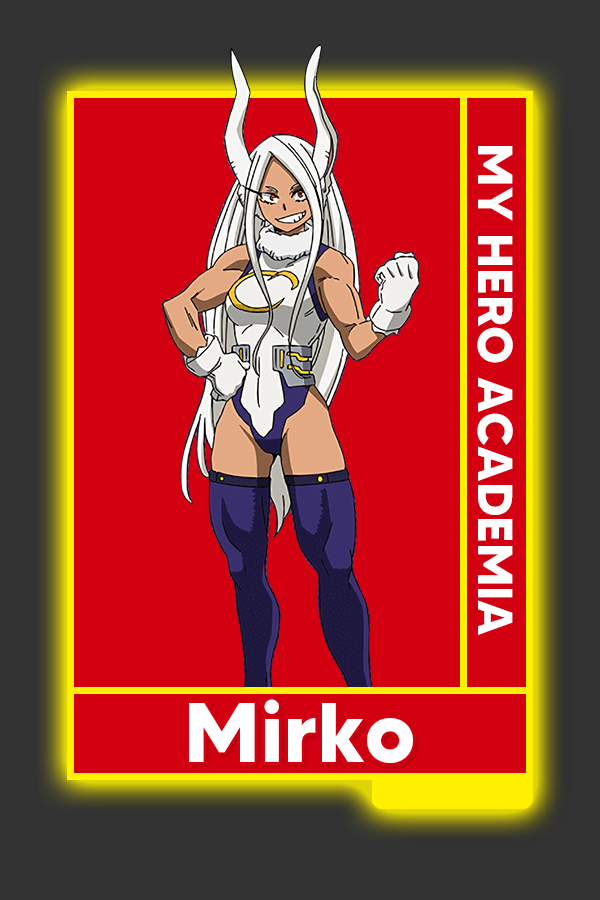
<style>
.page{position:relative;width:600px;height:900px;background:#d20010}
.page>*{position:absolute;margin:0}
.t1{font:48.8px "MADETOMMY-Bold";color:#ffffff}
.t2{font:84.8px "MADETOMMY-Bold";color:#ffffff}
</style>
<div class="page">
<p class="t1" style="left:477px;top:146px;width:36px;height:489px;rotate:90deg">MY HERO ACADEMIA</p>
<p class="t2" style="left:189px;top:699px;width:224px;height:64px">Mirko</p>
</div>
